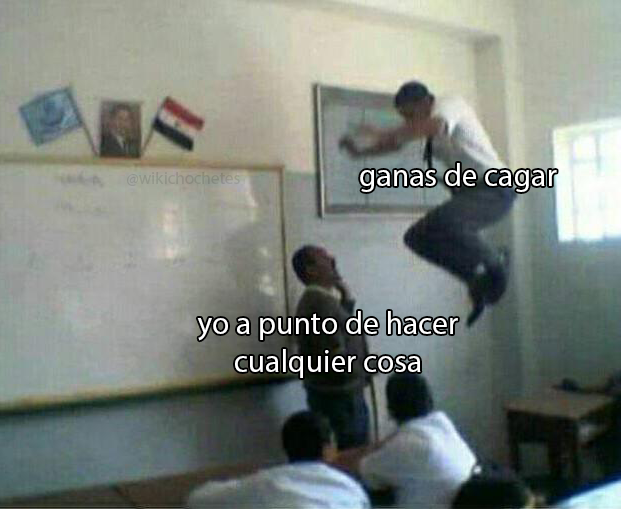
<style>
.page{position:relative;width:621px;height:509px}
.page>*{position:absolute;margin:0}
.t1{font:16.9px "MyriadPro-Regular";color:#919186}
.t2{font:31.6px "MyriadPro-Regular";color:#ffffff}
</style>
<div class="page">
<p class="t1" style="left:127px;top:172px;width:113px;height:14px">@wikichochetes</p>
<p class="t2" style="left:360px;top:163px;width:197px;height:29px">ganas de cagar</p>
<p class="t2" style="left:197px;top:311px;width:261px;height:67px;text-align:center">yo a punto de hacer<br>cualquier cosa</p>
</div>
